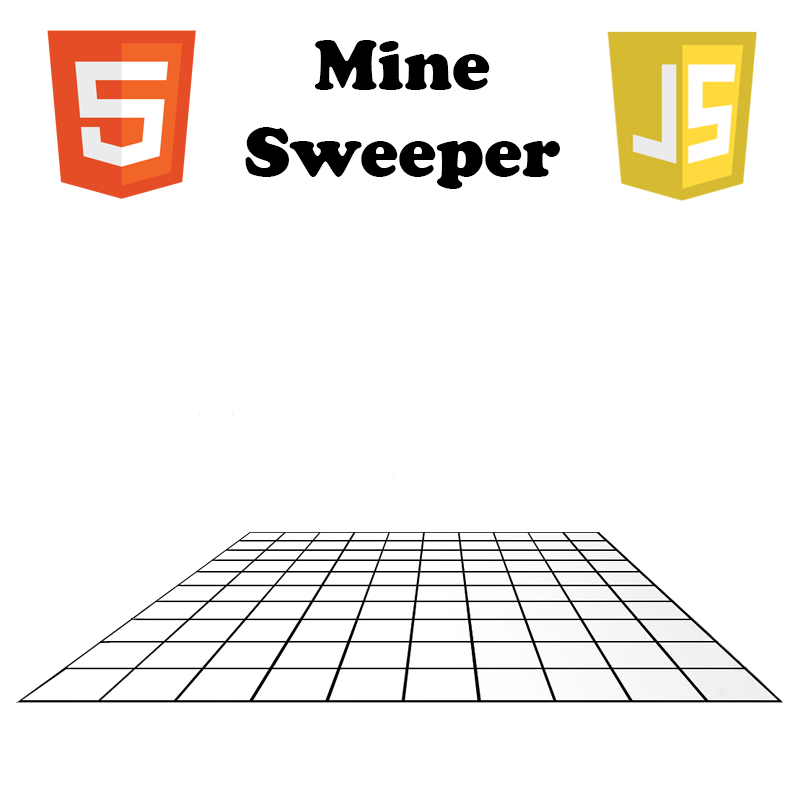
<style>
.page{position:relative;width:800px;height:800px;background:#ffffff}
.page>*{position:absolute;margin:0}
.t1{font:72px "CooperBlack";color:#000000}
</style>
<div class="page">
<p class="t1" style="left:245px;top:40px;width:315px;height:149px;text-align:center">Mine<br>Sweeper</p>
</div>
